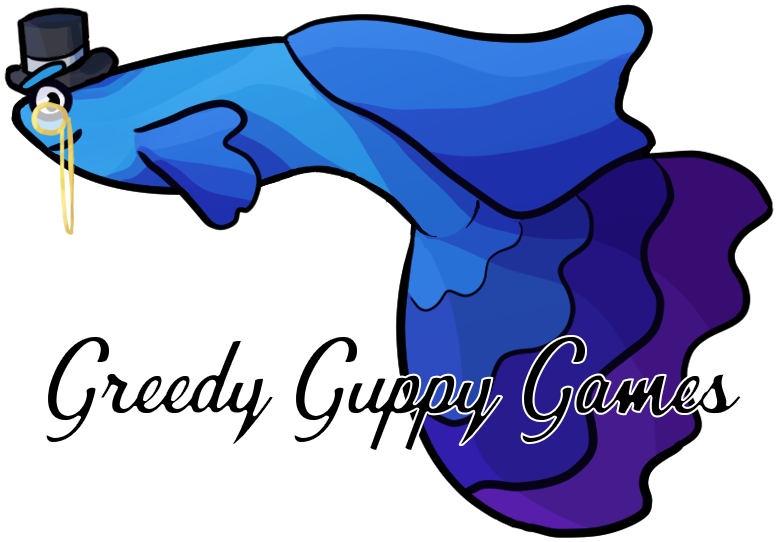
<style>
.page{position:relative;width:779px;height:542px;background:#ffffff}
.page>*{position:absolute;margin:0}
.t1{font:104px "QuickKissPersonalUse"}
</style>
<div class="page">
<p class="t1" style="left:44px;top:335px;width:699px;height:117px">Greedy Guppy Games</p>
</div>
